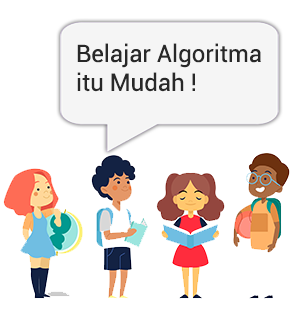
<style>
.page{position:relative;width:294px;height:314px;background:#ffffff}
.page>*{position:absolute;margin:0}
.t1{font:24px "Roboto-Regular";color:#282828}
</style>
<div class="page">
<p class="t1" style="left:77px;top:43px;width:184px;height:49px">Belajar Algoritma<br>itu Mudah !</p>
</div>
